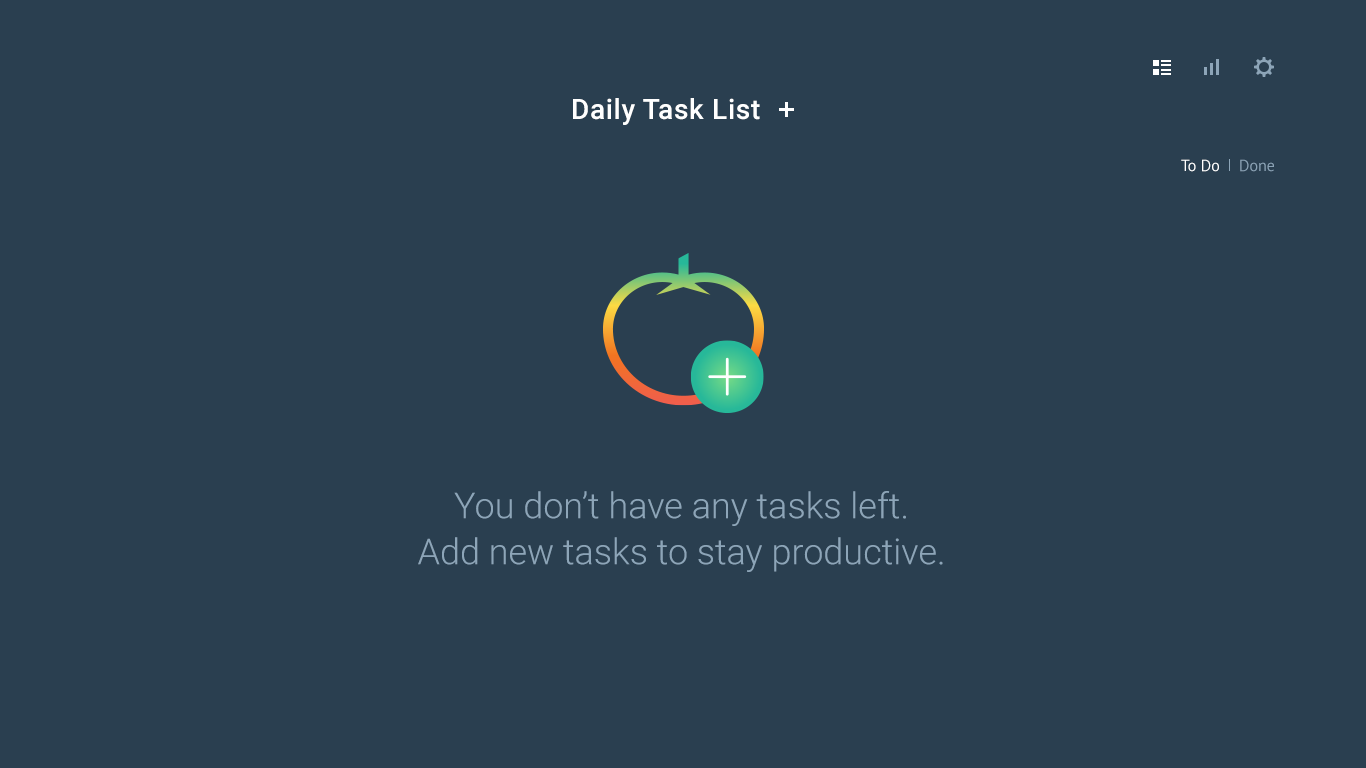
<style>
.page{position:relative;width:1366px;height:768px;background:#2a3f50}
.page>*{position:absolute;margin:0}
.t1{font:28px "Roboto-Medium";letter-spacing:0.025em;color:#ffffff}
.t2{font:16px "PTSans-Regular";color:#ffffff}
.t3{font:16px "PTSans-Regular";color:#8aa2b5}
.t4{font:36px/46px "Roboto-Light";color:#8da5b8}
</style>
<div class="page">
<p class="t1" style="left:573px;top:98px;width:187px;height:27px">Daily Task List</p>
<p class="t2" style="left:1181px;top:159px;width:38px;height:13px">To Do</p>
<p class="t3" style="left:1240px;top:159px;width:34px;height:13px">Done</p>
<p class="t4" style="left:418px;top:491px;width:525px;height:81px;text-align:center">You don’t have any tasks left.<br>Add new tasks to stay productive.</p>
</div>
